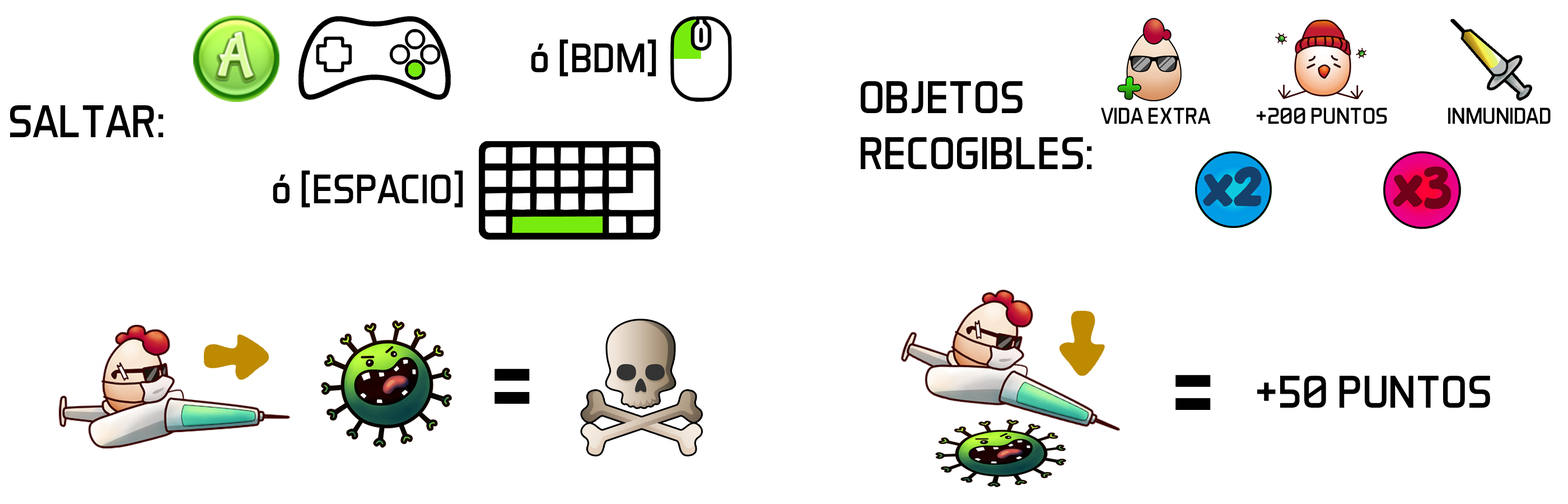
<style>
.page{position:relative;width:1568px;height:504px;background:#ffffff}
.page>*{position:absolute;margin:0}
.t1{font:42px "AeroMaticsRegular";color:#000000}
.t2{font:46.7px "AeroMaticsRegular";color:#000000}
.t3{font:23.3px "AeroMaticsRegular";color:#000000}
.t4{font:118px "AeroMaticsRegular";color:#000000}
</style>
<div class="page">
<p class="t1" style="left:531px;top:39px;width:125px;height:38px">ó [BDM]</p>
<p class="t2" style="left:861px;top:81px;width:231px;height:88px">OBJETOS<br>RECOGIBLES:</p>
<p class="t2" style="left:10px;top:105px;width:154px;height:32px">SALTAR:</p>
<p class="t3" style="left:1101px;top:108px;width:450px;height:16px">VIDA EXTRA          +200 PUNTOS             INMUNIDAD</p>
<p class="t1" style="left:273px;top:170px;width:190px;height:38px">ó [ESPACIO]</p>
<p class="t4" style="left:494px;top:368px;width:36px;height:36px">=</p>
<p class="t4" style="left:1175px;top:375px;width:36px;height:35px">=</p>
<p class="t2" style="left:1257px;top:376px;width:233px;height:32px">+50 PUNTOS</p>
</div>
